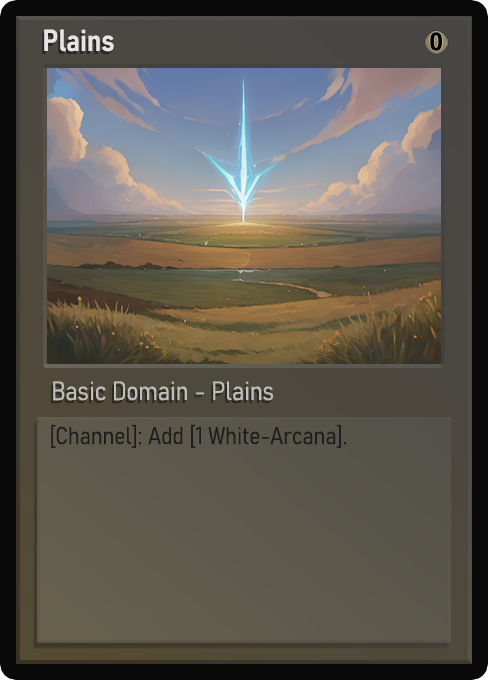
<style>
.page{position:relative;width:488px;height:680px}
.page>*{position:absolute;margin:0}
.t1{font:30px "Bahnschrift-SemiBoldSemiCondensed";color:#f2f2f2;font-weight:bold}
.t2{font:25px "WTRRoycroft";color:#000000;font-weight:bold;scale:1.09 1}
.t3{font:26px "Bahnschrift-LightSemiCondensed";color:#c8c8c8;font-weight:bold}
.t4{font:24px "Bahnschrift-LightSemiCondensed";color:#1e1e1e;font-weight:bold}
</style>
<div class="page">
<p class="t1" style="left:44px;top:29px;width:70px;height:23px;opacity:0.9">Plains</p>
<p class="t2" style="left:430px;top:32px;width:12px;height:19px">0</p>
<p class="t3" style="left:53px;top:381px;width:221px;height:20px;opacity:0.9">Basic Domain - Plains</p>
<p class="t4" style="left:51px;top:424px;width:295px;height:24px">[Channel]: Add [1 White-Arcana].</p>
</div>
